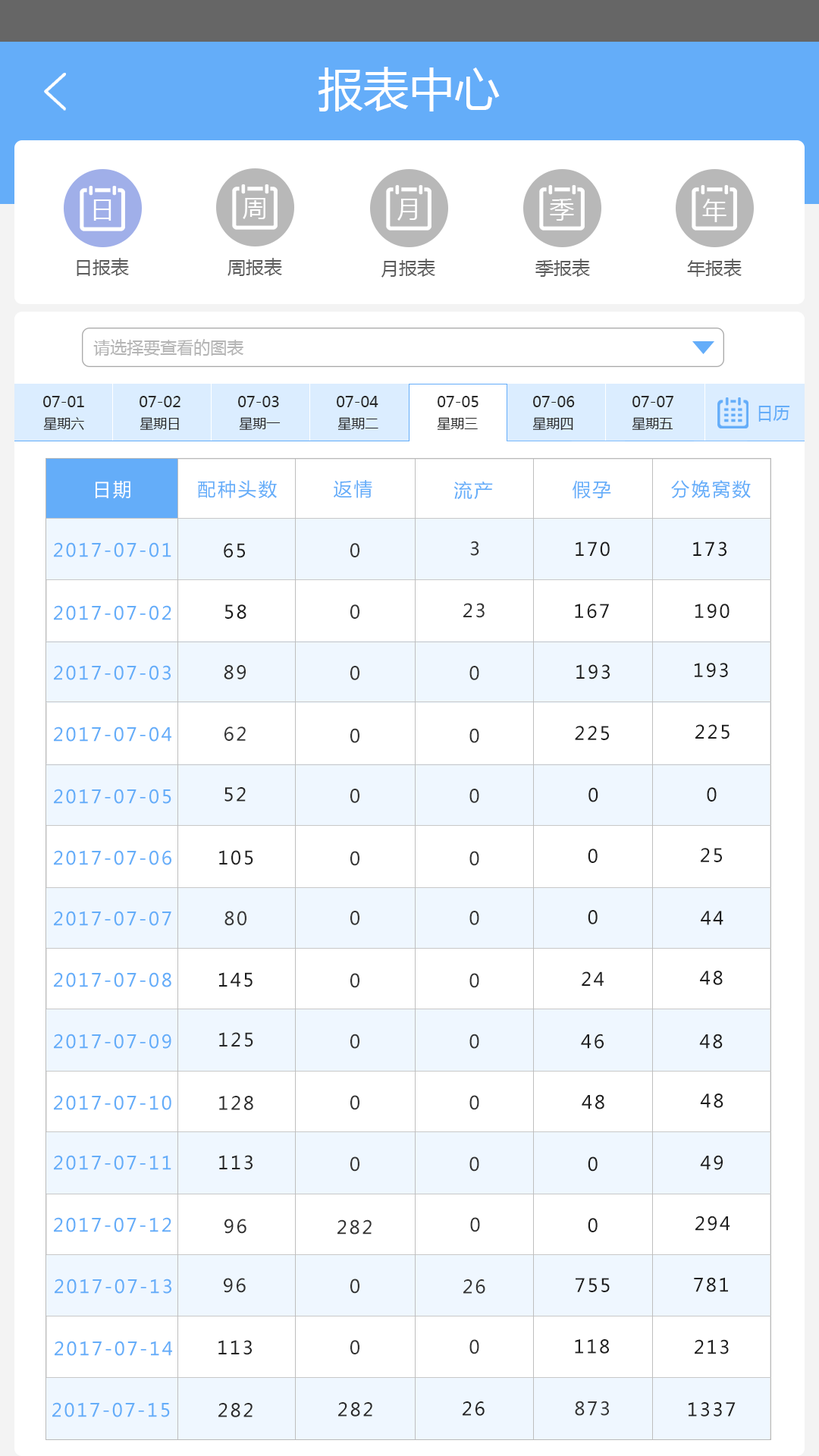
<style>
.page{position:relative;width:819px;height:1456px;background:#ffffff}
.page>*{position:absolute;margin:0}
.t1{font:45.5px "MicrosoftYaHei";color:#ffffff}
.t2{font:24.3px "MicrosoftYaHei";color:#ffffff}
.t3{font:18.2px "MicrosoftYaHei";color:#5c5c5c}
.t4{font:16.7px "MicrosoftYaHei";color:#b5b5b5}
.t5{font:15.2px "MicrosoftYaHei";color:#282828}
.t6{font:16.7px "MicrosoftYaHei";color:#64adf9}
.t7{font:13.6px "MicrosoftYaHei";color:#282828}
.t8{font:18.5px "MicrosoftYaHei";letter-spacing:0.1em;color:#ffffff}
.t9{font:18.5px "MicrosoftYaHei";letter-spacing:0.1em;color:#64adf9}
.t10{font:18.5px "MicrosoftYaHei";letter-spacing:0.1em;color:#1f1f1f}
.t11{font:18.5px "MicrosoftYaHei";letter-spacing:0.1em;color:#333333}
.t12{font:18.5px "MicrosoftYaHei";letter-spacing:0.1em;color:#1e1e1e}
.t13{font:18.5px "MicrosoftYaHei";letter-spacing:0.1em;color:#151515}
.t14{font:18.5px "MicrosoftYaHei";letter-spacing:0.1em;color:#1b1b1b}
.t15{font:18.5px "MicrosoftYaHei";letter-spacing:0.1em;color:#2e2e2e}
.t16{font:18.5px "MicrosoftYaHei";letter-spacing:0.1em;color:#333334}
.t17{font:18.5px "MicrosoftYaHei";letter-spacing:0.1em;color:#262626}
.t18{font:18.5px "MicrosoftYaHei";letter-spacing:0.1em;color:#212121}
.t19{font:18.5px "MicrosoftYaHei";letter-spacing:0.1em;color:#373737}
.t20{font:18.5px "MicrosoftYaHei";letter-spacing:0.1em;color:#1c1c1c}
.t21{font:18.5px "MicrosoftYaHei";letter-spacing:0.1em;color:#282828}
.t22{font:18.5px "MicrosoftYaHei";letter-spacing:0.1em;color:#242424}
.t23{font:18.5px "MicrosoftYaHei";letter-spacing:0.1em;color:#2f2f2f}
.t24{font:18.5px "MicrosoftYaHei";letter-spacing:0.1em;color:#2b2b2b}
.t25{font:18.5px "MicrosoftYaHei";letter-spacing:0.1em;color:#222222}
.t26{font:18.5px "MicrosoftYaHei";letter-spacing:0.1em;color:#343434}
</style>
<div class="page">
<p class="t1" style="left:318px;top:67px;width:182px;height:44px">报表中心</p>
<p class="t2" style="left:243px;top:198px;width:22px;height:21px">周</p>
<p class="t2" style="left:93px;top:199px;width:18px;height:22px">日</p>
<p class="t2" style="left:397px;top:199px;width:20px;height:22px">月</p>
<p class="t2" style="left:550px;top:199px;width:24px;height:22px">季</p>
<p class="t2" style="left:702px;top:199px;width:24px;height:23px">年</p>
<p class="t3" style="left:77px;top:258px;width:52px;height:18px">日报表</p>
<p class="t3" style="left:227px;top:258px;width:55px;height:18px">周报表</p>
<p class="t3" style="left:381px;top:259px;width:54px;height:19px">月报表</p>
<p class="t3" style="left:535px;top:259px;width:55px;height:18px">季报表</p>
<p class="t3" style="left:687px;top:259px;width:55px;height:18px">年报表</p>
<p class="t4" style="left:93px;top:339px;width:150px;height:17px">请选择要查看的图表</p>
<p class="t5" style="left:43px;top:396px;width:41px;height:11px">07-01</p>
<p class="t5" style="left:140px;top:396px;width:40px;height:11px">07-02</p>
<p class="t5" style="left:238px;top:396px;width:41px;height:11px">07-03</p>
<p class="t5" style="left:337px;top:396px;width:41px;height:11px">07-04</p>
<p class="t5" style="left:438px;top:396px;width:41px;height:11px">07-05</p>
<p class="t5" style="left:533px;top:396px;width:42px;height:11px">07-06</p>
<p class="t5" style="left:632px;top:396px;width:42px;height:11px">07-07</p>
<p class="t6" style="left:758px;top:406px;width:32px;height:16px">日历</p>
<p class="t7" style="left:43px;top:417px;width:41px;height:13px">星期六</p>
<p class="t7" style="left:140px;top:417px;width:39px;height:13px">星期日</p>
<p class="t7" style="left:239px;top:417px;width:42px;height:13px">星期一</p>
<p class="t7" style="left:337px;top:417px;width:41px;height:13px">星期二</p>
<p class="t7" style="left:437px;top:417px;width:41px;height:13px">星期三</p>
<p class="t7" style="left:532px;top:417px;width:41px;height:13px">星期四</p>
<p class="t7" style="left:632px;top:417px;width:41px;height:13px">星期五</p>
<p class="t8" style="left:96px;top:481px;width:34px;height:18px">日期</p>
<p class="t9" style="left:198px;top:480px;width:79px;height:18px">配种头数</p>
<p class="t9" style="left:334px;top:480px;width:38px;height:18px">返情</p>
<p class="t9" style="left:453px;top:481px;width:40px;height:19px">流产</p>
<p class="t9" style="left:573px;top:481px;width:38px;height:18px">假孕</p>
<p class="t9" style="left:671px;top:480px;width:80px;height:18px">分娩窝数</p>
<p class="t9" style="left:54px;top:542px;width:117px;height:15px">2017-07-01</p>
<p class="t10" style="left:224px;top:543px;width:21px;height:15px">65</p>
<p class="t11" style="left:350px;top:543px;width:9px;height:14px">0</p>
<p class="t11" style="left:470px;top:541px;width:9px;height:15px">3</p>
<p class="t12" style="left:576px;top:541px;width:34px;height:16px">170</p>
<p class="t13" style="left:693px;top:541px;width:33px;height:16px">173</p>
<p class="t9" style="left:54px;top:605px;width:117px;height:15px">2017-07-02</p>
<p class="t14" style="left:225px;top:604px;width:21px;height:15px">58</p>
<p class="t11" style="left:350px;top:604px;width:9px;height:15px">0</p>
<p class="t11" style="left:463px;top:603px;width:22px;height:15px">23</p>
<p class="t12" style="left:575px;top:604px;width:34px;height:14px">167</p>
<p class="t12" style="left:695px;top:604px;width:35px;height:14px">190</p>
<p class="t9" style="left:54px;top:665px;width:117px;height:15px">2017-07-03</p>
<p class="t15" style="left:224px;top:665px;width:22px;height:14px">89</p>
<p class="t11" style="left:350px;top:666px;width:9px;height:14px">0</p>
<p class="t11" style="left:469px;top:666px;width:10px;height:14px">0</p>
<p class="t12" style="left:576px;top:664px;width:34px;height:15px">193</p>
<p class="t12" style="left:695px;top:663px;width:33px;height:14px">193</p>
<p class="t12" style="left:575px;top:726px;width:34px;height:14px">225</p>
<p class="t12" style="left:695px;top:724px;width:35px;height:15px">225</p>
<p class="t9" style="left:54px;top:726px;width:117px;height:16px">2017-07-04</p>
<p class="t16" style="left:224px;top:726px;width:22px;height:15px">62</p>
<p class="t11" style="left:350px;top:728px;width:9px;height:15px">0</p>
<p class="t11" style="left:469px;top:728px;width:10px;height:15px">0</p>
<p class="t9" style="left:54px;top:789px;width:117px;height:15px">2017-07-05</p>
<p class="t17" style="left:224px;top:787px;width:22px;height:15px">52</p>
<p class="t11" style="left:350px;top:789px;width:9px;height:14px">0</p>
<p class="t11" style="left:469px;top:789px;width:10px;height:14px">0</p>
<p class="t12" style="left:588px;top:787px;width:10px;height:15px">0</p>
<p class="t12" style="left:707px;top:787px;width:10px;height:15px">0</p>
<p class="t9" style="left:54px;top:850px;width:117px;height:15px">2017-07-06</p>
<p class="t18" style="left:219px;top:850px;width:34px;height:15px">105</p>
<p class="t11" style="left:350px;top:851px;width:9px;height:15px">0</p>
<p class="t11" style="left:469px;top:851px;width:10px;height:15px">0</p>
<p class="t12" style="left:588px;top:849px;width:10px;height:14px">0</p>
<p class="t12" style="left:701px;top:848px;width:21px;height:14px">25</p>
<p class="t9" style="left:54px;top:911px;width:117px;height:15px">2017-07-07</p>
<p class="t19" style="left:224px;top:911px;width:22px;height:15px">80</p>
<p class="t11" style="left:350px;top:911px;width:9px;height:14px">0</p>
<p class="t11" style="left:469px;top:911px;width:10px;height:14px">0</p>
<p class="t12" style="left:588px;top:910px;width:10px;height:14px">0</p>
<p class="t12" style="left:701px;top:911px;width:22px;height:14px">44</p>
<p class="t9" style="left:54px;top:972px;width:117px;height:15px">2017-07-08</p>
<p class="t20" style="left:219px;top:972px;width:34px;height:15px">145</p>
<p class="t11" style="left:350px;top:973px;width:9px;height:15px">0</p>
<p class="t11" style="left:469px;top:973px;width:10px;height:15px">0</p>
<p class="t12" style="left:582px;top:971px;width:22px;height:15px">24</p>
<p class="t12" style="left:700px;top:971px;width:23px;height:14px">48</p>
<p class="t9" style="left:54px;top:1034px;width:117px;height:15px">2017-07-09</p>
<p class="t21" style="left:219px;top:1032px;width:34px;height:15px">125</p>
<p class="t11" style="left:350px;top:1034px;width:9px;height:15px">0</p>
<p class="t11" style="left:469px;top:1034px;width:10px;height:15px">0</p>
<p class="t12" style="left:581px;top:1034px;width:23px;height:15px">46</p>
<p class="t12" style="left:699px;top:1034px;width:24px;height:15px">48</p>
<p class="t9" style="left:54px;top:1095px;width:117px;height:15px">2017-07-10</p>
<p class="t15" style="left:219px;top:1096px;width:34px;height:14px">128</p>
<p class="t11" style="left:350px;top:1095px;width:9px;height:15px">0</p>
<p class="t11" style="left:469px;top:1095px;width:10px;height:15px">0</p>
<p class="t12" style="left:582px;top:1094px;width:22px;height:15px">48</p>
<p class="t12" style="left:700px;top:1094px;width:23px;height:14px">48</p>
<p class="t9" style="left:54px;top:1155px;width:117px;height:15px">2017-07-11</p>
<p class="t22" style="left:219px;top:1155px;width:34px;height:15px">113</p>
<p class="t11" style="left:350px;top:1156px;width:9px;height:16px">0</p>
<p class="t11" style="left:469px;top:1156px;width:10px;height:16px">0</p>
<p class="t12" style="left:588px;top:1156px;width:10px;height:16px">0</p>
<p class="t12" style="left:700px;top:1155px;width:23px;height:15px">49</p>
<p class="t9" style="left:54px;top:1217px;width:117px;height:15px">2017-07-12</p>
<p class="t11" style="left:470px;top:1217px;width:10px;height:15px">0</p>
<p class="t12" style="left:588px;top:1218px;width:10px;height:14px">0</p>
<p class="t12" style="left:695px;top:1216px;width:35px;height:15px">294</p>
<p class="t23" style="left:224px;top:1219px;width:22px;height:15px">96</p>
<p class="t11" style="left:337px;top:1219px;width:35px;height:16px">282</p>
<p class="t23" style="left:224px;top:1278px;width:22px;height:15px">96</p>
<p class="t12" style="left:576px;top:1278px;width:34px;height:14px">755</p>
<p class="t12" style="left:694px;top:1277px;width:34px;height:15px">781</p>
<p class="t9" style="left:55px;top:1279px;width:116px;height:15px">2017-07-13</p>
<p class="t11" style="left:350px;top:1279px;width:9px;height:15px">0</p>
<p class="t11" style="left:463px;top:1279px;width:22px;height:15px">26</p>
<p class="t9" style="left:55px;top:1341px;width:117px;height:15px">2017-07-14</p>
<p class="t22" style="left:218px;top:1340px;width:34px;height:15px">113</p>
<p class="t11" style="left:350px;top:1340px;width:9px;height:14px">0</p>
<p class="t11" style="left:469px;top:1339px;width:10px;height:15px">0</p>
<p class="t12" style="left:575px;top:1339px;width:34px;height:15px">118</p>
<p class="t12" style="left:695px;top:1339px;width:34px;height:15px">213</p>
<p class="t9" style="left:52px;top:1402px;width:118px;height:15px">2017-07-15</p>
<p class="t24" style="left:218px;top:1403px;width:35px;height:14px">282</p>
<p class="t24" style="left:338px;top:1402px;width:34px;height:15px">282</p>
<p class="t25" style="left:463px;top:1401px;width:22px;height:15px">26</p>
<p class="t26" style="left:575px;top:1401px;width:34px;height:15px">873</p>
<p class="t25" style="left:689px;top:1402px;width:47px;height:15px">1337</p>
</div>
